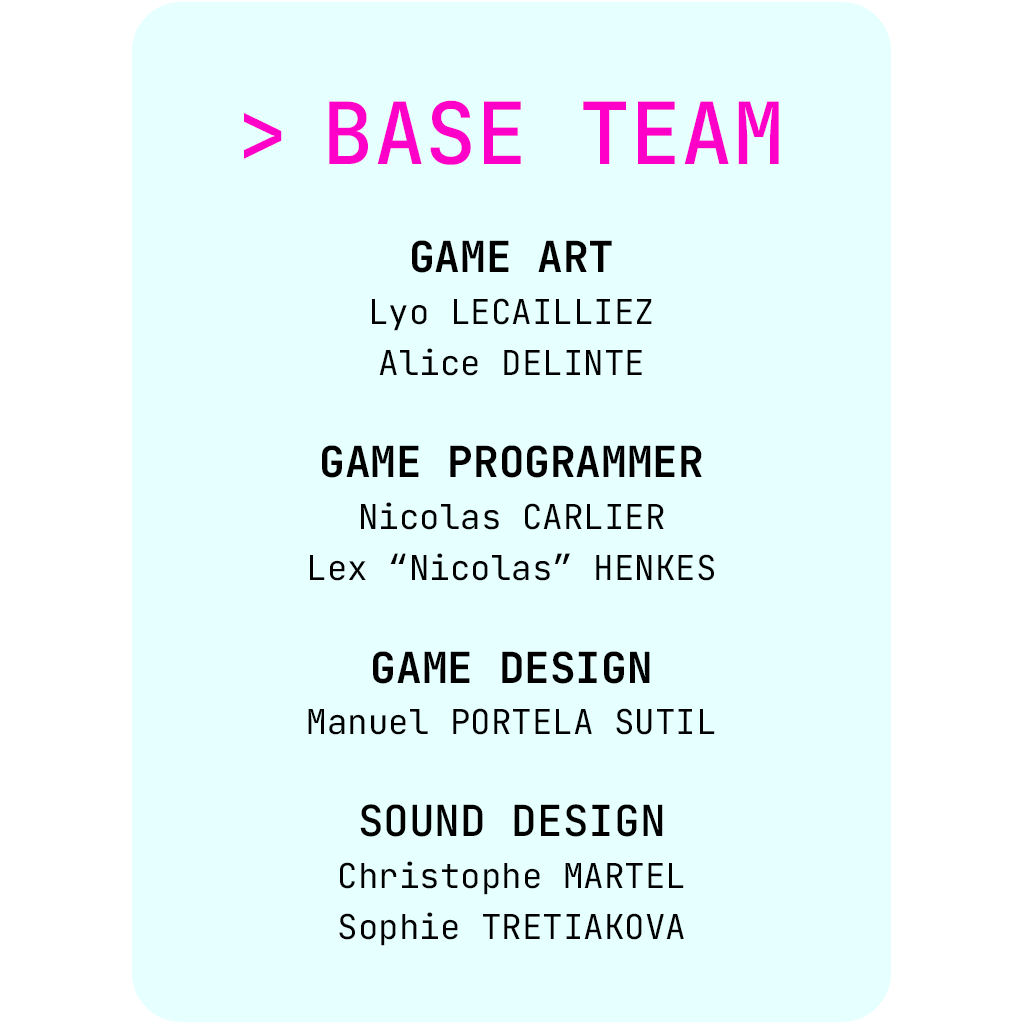
<style>
.page{position:relative;width:1024px;height:1024px;background:#e6ffff}
.page>*{position:absolute;margin:0}
.t1{font:85.5px "JetBrainsMonoRoman-Medium";color:#ff00c8}
.t2{font:34.2px/51.3px "JetBrainsMono-Regular";color:#000000}
.t3{font:42.7px/51.3px "JetBrainsMonoRoman-Bold";color:#000000}
.t4{font:42.7px/51.3px "JetBrainsMonoRoman-Medium";color:#000000}
</style>
<div class="page">
<p class="t1" style="left:244px;top:100px;width:535px;height:65px">BASE TEAM</p>
<p class="t2" style="left:308px;top:240px;width:407px;height:706px;text-align:center"><span class="t3">GAME ART<br></span>Lyo LECAILLIEZ<br>Alice DELINTE<br><br><span class="t3">GAME PROGRAMMER<br></span>Nicolas CARLIER<br>Lex “Nicolas” HENKES<br><br><span class="t3">GAME DESIGN<br></span>Manuel PORTELA SUTIL<br><br><span class="t4">SOUND DESIGN<br></span>Christophe MARTEL<br>Sophie TRETIAKOVA</p>
</div>
